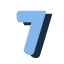
<style>
.page{position:relative;width:64px;height:64px;background:#ffffff}
.page>*{position:absolute;margin:0}
.t1{font:66px "Samba"}
</style>
<div class="page">
<p class="t1" style="left:22px;top:13px;width:31px;height:45px">7</p>
</div>
